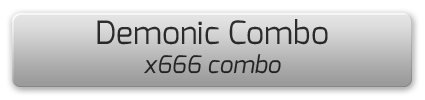
<style>
.page{position:relative;width:425px;height:100px}
.page>*{position:absolute;margin:0}
.t1{font:32px "Exo-Regular";color:#292929}
.t2{font:24px "Exo-Italic";color:#292929}
</style>
<div class="page">
<p class="t1" style="left:97px;top:19px;width:231px;height:55px;text-align:center">Demonic Combo<br><span class="t2">x666 combo</span></p>
</div>
